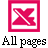
<style>
.page{position:relative;width:48px;height:48px;background:#ffffff}
.page>*{position:absolute;margin:0}
.t1{font:12px "TimesNewRomanPSMT";color:#000000}
</style>
<div class="page">
<p class="t1" style="left:2px;top:36px;width:44px;height:12px">All pages</p>
</div>
